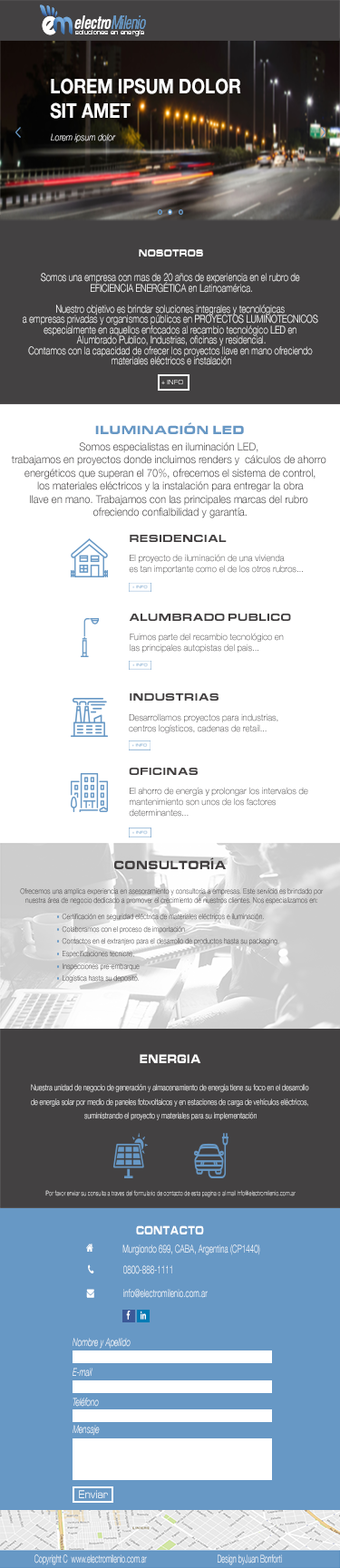
<style>
.page{position:relative;width:340px;height:1568px;background:#ffffff}
.page>*{position:absolute;margin:0}
.t1{font:20.2px "HelveticaNeue-Bold";color:#ffffff;scale:0.85 1}
.t2{font:9.3px "HelveticaNeue-LightItalic";color:#ffffff;scale:0.85 1}
.t3{font:10.4px "EurostileExtended-Black";color:#ffffff;scale:0.77 1}
.t4{font:10.9px/10.4px "HelveticaNeue-Light";color:#ffffff;scale:0.77 1}
.t5{font:6.1px "Eurostile-ExtendedTwo";color:#ffffff;scale:0.8 1}
.t6{font:12.7px "EurostileExtended-Black";color:#6798c5;scale:0.94 1}
.t7{font:10.9px "HelveticaNeue-Light";color:#423f40;scale:0.94 1}
.t8{font:10.9px "EurostileExtended-Black";color:#423f40;scale:0.94 1}
.t9{font:9.1px "HelveticaNeue-Light";color:#423f40;scale:0.94 1}
.t10{font:9.1px "HelveticaNeue-Light";scale:0.94 1}
.t11{font:12.7px "EurostileExtended-Black";color:#423f40;scale:0.86 1}
.t12{font:7.4px/9.3px "HelveticaNeue-Light";scale:0.86 1}
.t13{font:7.4px/12.4px "HelveticaNeue-Light";scale:0.86 1}
.t14{font:12.7px "EurostileExtended-Black";color:#ffffff;scale:0.76 1}
.t15{font:8.4px/13.9px "HelveticaNeue-Light";scale:0.76 1}
.t16{font:6.6px "HelveticaNeue-Light";scale:0.76 1}
.t17{font:12.7px "EurostileExtended-Black";color:#ffffff;scale:0.67 1}
.t18{font:10.9px "HelveticaNeue-Light";scale:0.67 1}
.t19{font:10.9px "HelveticaNeue-LightItalic";color:#ffffff;scale:0.67 1}
.t20{font:10.9px "HelveticaNeue-LightItalic";scale:0.67 1}
.t21{font:10.9px "Eurostile-ExtendedTwo";color:#ffffff;scale:0.67 1}
.t22{font:10.9px "HelveticaNeue-Light";scale:0.59 1}
.t23{font:10.9px "HelveticaNeue-Light";color:#ffffff;scale:0.59 1}
</style>
<div class="page">
<p class="t1" style="left:50px;top:78px;width:191px;height:41px">LOREM IPSUM DOLOR<br>SIT AMET</p>
<p class="t2" style="left:51px;top:133px;width:65px;height:9px">Lorem ipsum dolor</p>
<p class="t3" style="left:139px;top:249px;width:64px;height:7px">NOSOTROS</p>
<p class="t4" style="left:23px;top:273px;width:295px;height:92px;text-align:center">Somos una empresa con mas de 20 años de experiencia en el rubro de <br>EFICIENCIA ENERGÉTICA en Latinoamérica.<br><br>Nuestro objetivo es brindar soluciones integrales y tecnológicas <br>a empresas privadas y organismos públicos en PROYECTOS LUMINOTECNICOS <br>especialmente en aquellos enfocados al recambio tecnológico LED en <br>Alumbrado Publico, Industrias, oficinas y residencial.<br>Contamos con la capacidad de ofrecer los proyectos llave en mano ofreciendo <br>materiales eléctricos e instalación</p>
<p class="t5" style="left:161px;top:380px;width:22px;height:4px">+ INFO</p>
<p class="t6" style="left:95px;top:422px;width:149px;height:12px">ILUMINACIÓN LED</p>
<p class="t7" style="left:11px;top:442px;width:315px;height:76px;text-align:center">Somos especialistas en iluminación LED, <br>trabajamos en proyectos donde incluimos renders y  cálculos de ahorro <br>energéticos que superan el 70%, ofrecemos el sistema de control,<br> los materiales eléctricos y la instalación para entregar la obra <br>llave en mano. Trabajamos con las principales marcas del rubro <br>ofreciendo confialbilidad y garantía.</p>
<p class="t8" style="left:130px;top:535px;width:97px;height:7px">RESIDENCIAL</p>
<p class="t9" style="left:129px;top:554px;width:174px;height:20px">El proyecto de iluminación de una vivienda <br>es tan importante como el de los otros rubros...</p>
<p class="t8" style="left:129px;top:614px;width:162px;height:7px">ALUMBRADO PUBLICO</p>
<p class="t10" style="left:130px;top:633px;width:154px;height:20px">Fuimos parte del recambio tecnológico en<br>las principales autopistas del pais...</p>
<p class="t8" style="left:130px;top:693px;width:88px;height:8px">INDUSTRIAS</p>
<p class="t10" style="left:129px;top:713px;width:149px;height:20px">Desarrollamos proyectos para industrias, <br>centros logísticos, cadenas de retail...</p>
<p class="t8" style="left:129px;top:768px;width:69px;height:7px">OFICINAS</p>
<p class="t10" style="left:129px;top:787px;width:179px;height:30px">El ahorro de energía y prolongar los intervalos de <br>mantenimiento son unos de los factores <br>determinantes...</p>
<p class="t11" style="left:114px;top:857px;width:112px;height:12px">CONSULTORÍA</p>
<p class="t12" style="left:20px;top:888px;width:304px;height:17px;text-align:center">Ofrecemos una amplica experiencia en asesoramiento y consultoría a empresas. Este servicio es brindado por<br>nuestra área de negocio dedicado a promover el crecimiento de nuestros clientes. Nos especializamos en:</p>
<p class="t13" style="left:62px;top:914px;width:217px;height:68px"><span class="t12">Certificación en seguridad eléctrica de materiales eléctricos e iluminación.<br></span>Colaboramos con el proceso de importación <br>Contactos en el extranjero para el desarrollo de productos hasta su packaging, <br>Especificaciones tecnicas, <br>Inspecciones pre-embarque <br>Logística hasta su deposito.</p>
<p class="t14" style="left:140px;top:1054px;width:61px;height:9px">ENERGIA</p>
<p class="t15" style="left:31px;top:1084px;width:278px;height:36px;text-align:center">Nuestra unidad de negocio de generación y almacenamiento de energía tiene su foco en el desarrollo <br>de energía solar por medio de paneles fotovoltaicos y en estaciones de carga de vehículos eléctricos, <br>suministrando el proyecto y materiales para su implementación</p>
<p class="t16" style="left:45px;top:1190px;width:250px;height:7px">Por favor enviar su consulta a traves del formulario de contacto de esta pagina o al mail info@electromilenio.com.ar</p>
<p class="t17" style="left:136px;top:1225px;width:68px;height:9px">CONTACTO</p>
<p class="t18" style="left:122px;top:1244px;width:138px;height:11px">Murgiondo 699, CABA, Argentina (CP1440)</p>
<p class="t18" style="left:123px;top:1265px;width:49px;height:9px">0800-888-1111</p>
<p class="t18" style="left:123px;top:1289px;width:85px;height:9px">info@electromilenio.com.ar</p>
<p class="t19" style="left:73px;top:1338px;width:58px;height:11px">Nombre y Apellido</p>
<p class="t20" style="left:73px;top:1368px;width:19px;height:9px">E-mail</p>
<p class="t20" style="left:73px;top:1398px;width:26px;height:9px">Teléfono</p>
<p class="t19" style="left:73px;top:1425px;width:27px;height:11px">Mensaje</p>
<p class="t21" style="left:79px;top:1490px;width:29px;height:8px">Enviar</p>
<p class="t22" style="left:34px;top:1554px;width:113px;height:11px">Copyright C  www.electromilenio.com.ar</p>
<p class="t23" style="left:218px;top:1554px;width:64px;height:11px">Design byJuan Bonforti</p>
</div>
